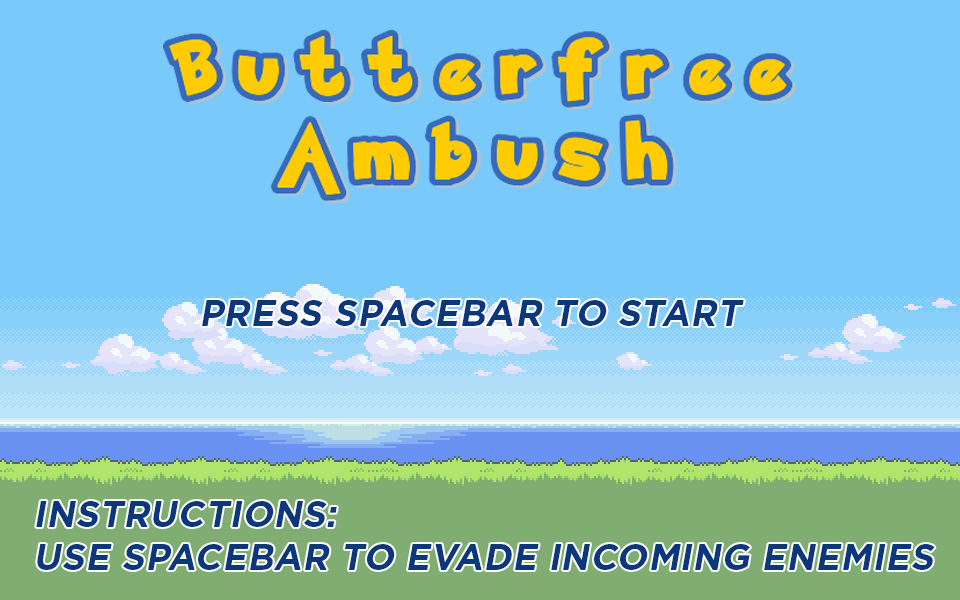
<style>
.page{position:relative;width:960px;height:600px;background:#79c9fa}
.page>*{position:absolute;margin:0}
.t1{font:36px "GothamPro-Bold";color:#0d377c;text-transform:uppercase;font-style:italic}
</style>
<div class="page">
<p class="t1" style="left:202px;top:300px;width:542px;height:26px">Press spacebar to start</p>
<p class="t1" style="left:36px;top:501px;width:899px;height:69px">Instructions:<br>Use spacebar to evade incoming enemies</p>
</div>
